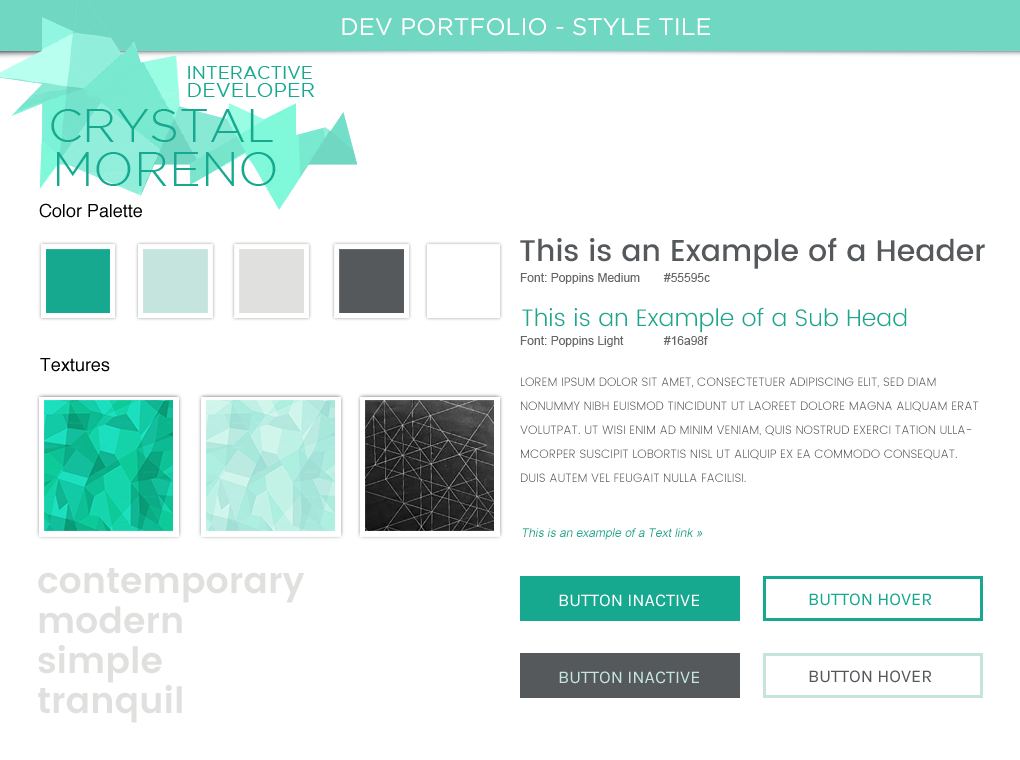
<style>
.page{position:relative;width:1020px;height:760px;background:#ffffff}
.page>*{position:absolute;margin:0}
.t1{font:24px "GothamBook";color:#ffffff;text-transform:uppercase}
.t2{font:18px "Helvetica";color:#000000}
.t3{font:30px "Poppins-Medium";color:#55595c}
.t4{font:12px "ArialMT";color:#666666}
.t5{font:24px "Poppins-Light";color:#16a98f}
.t6{font:12px/24px "Poppins-Light";color:#55595c;text-transform:uppercase}
.t7{font:12px "ArialMT";color:#16a98f;font-style:italic}
.t8{font:36px "Poppins-SemiBold";color:#e0e0de}
.t9{font:18px "Karla-Regular";color:#16a98f}
.t10{font:18px "Karla-Regular";color:#ffffff}
.t11{font:18px "Karla-Regular";color:#c4e4dd}
.t12{font:18px "Karla-Regular";color:#55595c}
</style>
<div class="page">
<p class="t1" style="left:342px;top:18px;width:368px;height:18px">Dev Portfolio - style tile</p>
<p class="t2" style="left:39px;top:203px;width:103px;height:15px">Color Palette</p>
<p class="t3" style="left:520px;top:237px;width:465px;height:32px">This is an Example of a Header</p>
<p class="t4" style="left:520px;top:273px;width:190px;height:11px">Font: Poppins Medium #55595c</p>
<p class="t5" style="left:522px;top:307px;width:385px;height:26px">This is an Example of a Sub Head</p>
<p class="t4" style="left:520px;top:336px;width:188px;height:11px">Font: Poppins Light  #16a98f</p>
<p class="t2" style="left:40px;top:358px;width:70px;height:14px">Textures</p>
<p class="t6" style="left:520px;top:377px;width:459px;height:105px">Lorem ipsum dolor sit amet, consectetuer adipiscing elit, sed diam nonummy nibh euismod tincidunt ut laoreet dolore magna aliquam erat volutpat. Ut wisi enim ad minim veniam, quis nostrud exerci tation ullamcorper suscipit lobortis nisl ut aliquip ex ea commodo consequat. Duis autem vel feugait nulla facilisi.</p>
<p class="t7" style="left:522px;top:528px;width:181px;height:12px">This is an example of a Text link »</p>
<p class="t8" style="left:38px;top:568px;width:267px;height:35px">contemporary</p>
<p class="t9" style="left:809px;top:593px;width:123px;height:13px">BUTTON HOVER</p>
<p class="t8" style="left:39px;top:606px;width:143px;height:28px">modern</p>
<p class="t10" style="left:559px;top:594px;width:140px;height:13px">BUTTON INACTIVE</p>
<p class="t8" style="left:38px;top:645px;width:124px;height:38px">simple</p>
<p class="t11" style="left:559px;top:671px;width:140px;height:13px">BUTTON INACTIVE</p>
<p class="t12" style="left:809px;top:670px;width:123px;height:13px">BUTTON HOVER</p>
<p class="t8" style="left:38px;top:685px;width:144px;height:38px">tranquil</p>
</div>
